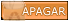
<style>
.page{position:relative;width:69px;height:21px}
.page>*{position:absolute;margin:0}
.t1{font:10.7px "Verdana";color:#ffffff}
</style>
<div class="page">
<p class="t1" style="left:22px;top:7px;width:44px;height:9px">APAGAR</p>
</div>
